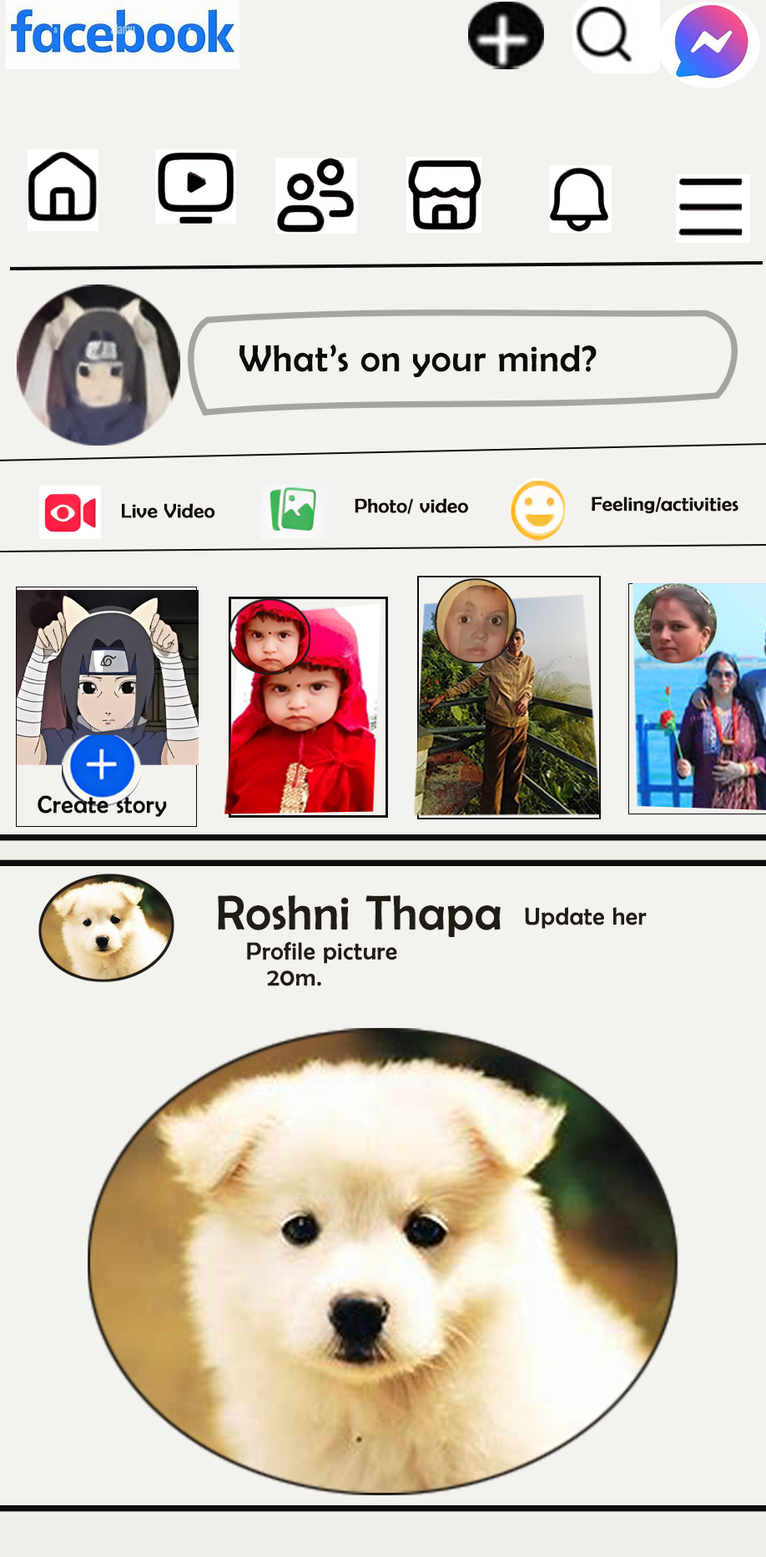
<style>
.page{position:relative;width:766px;height:1557px;background:#f4f2ee}
.page>*{position:absolute;margin:0}
.t1{font:64.1px "BerlinSansFB-Reg";letter-spacing:0.01em;color:#0c0b09;font-weight:bold}
.t2{font:34.8px "BerlinSansFB-Reg";letter-spacing:0.01em;color:#120e08;font-weight:bold}
.t3{font:41.7px "BerlinSansFB-Reg";letter-spacing:0.01em;color:#0c0b09;font-weight:bold}
.t4{font:83.4px "BerlinSansFB-Reg";letter-spacing:0.01em;color:#201c16;font-weight:bold}
.t5{font:41.7px "BerlinSansFB-Reg";letter-spacing:0.01em;color:#201c16;font-weight:bold}
</style>
<div class="page">
<p class="t1" style="left:239px;top:344px;width:358px;height:33px">What’s on your mind?</p>
<p class="t2" style="left:592px;top:496px;width:146px;height:18px">Feeling/activities</p>
<p class="t2" style="left:122px;top:503px;width:93px;height:15px">Live Video</p>
<p class="t2" style="left:355px;top:498px;width:113px;height:16px">Photo/ video</p>
<p class="t3" style="left:38px;top:795px;width:129px;height:22px">Create story</p>
<p class="t4" style="left:218px;top:895px;width:283px;height:42px">Roshni Thapa</p>
<p class="t5" style="left:525px;top:907px;width:122px;height:22px">Update her</p>
<p class="t5" style="left:247px;top:941px;width:150px;height:23px">Profile picture</p>
<p class="t5" style="left:267px;top:970px;width:54px;height:16px">20m.</p>
</div>
